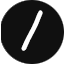
<style>
.page{position:relative;width:64px;height:64px;background:#101010}
.page>*{position:absolute;margin:0}
.t1{font:48px "ComicSansMS";color:#ffffff}
.t2{font:48px "ArialMT";color:#ffffff}
</style>
<div class="page">
<p class="t1" style="left:21px;top:10px;width:22px;height:41px;text-align:center">/<br><span class="t2">0</span></p>
</div>
